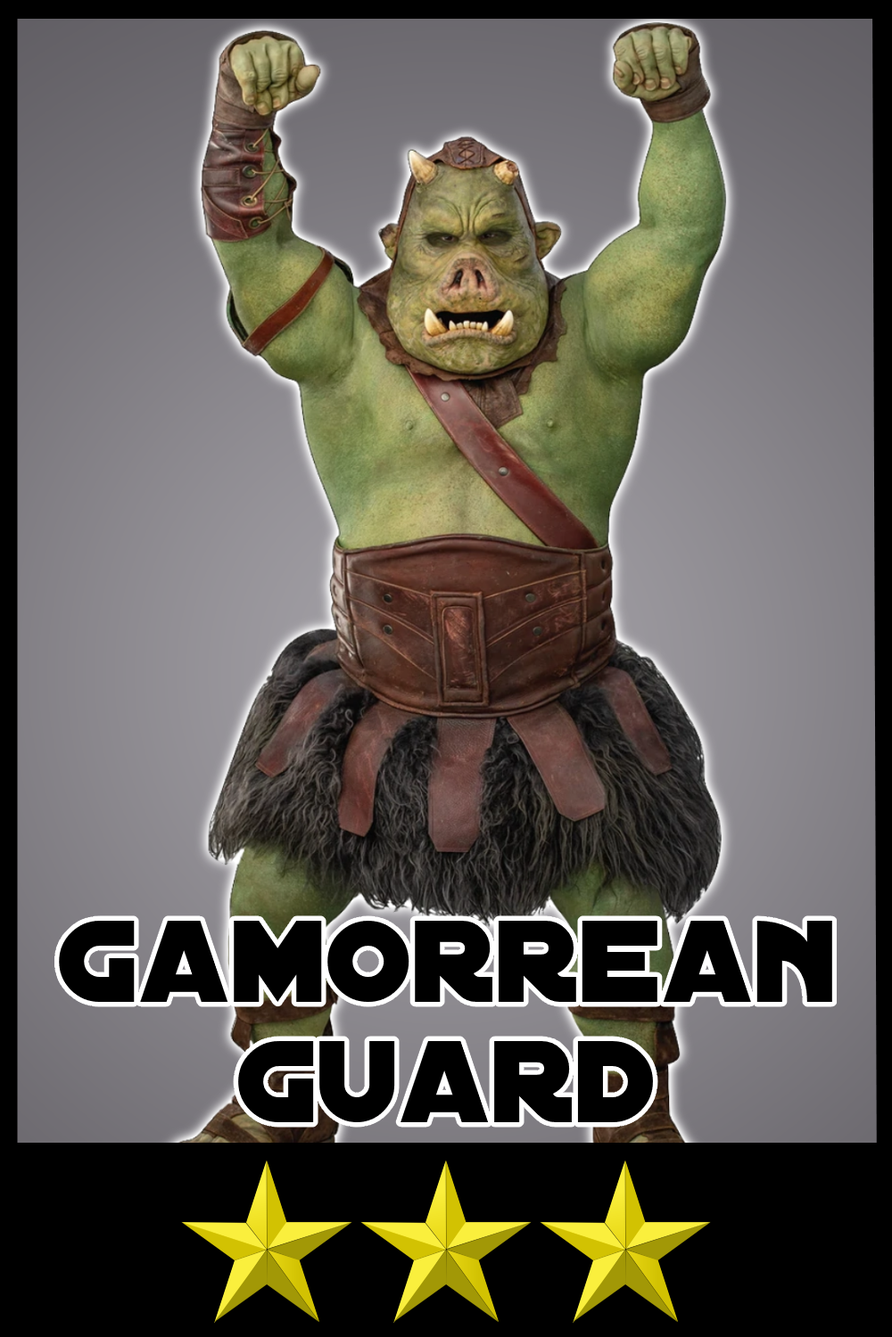
<style>
.page{position:relative;width:892px;height:1337px;background:#000000}
.page>*{position:absolute;margin:0}
.t1{font:124.8px/120.4px "DistantGalaxy";color:#000000}
</style>
<div class="page">
<p class="t1" style="left:59px;top:920px;width:773px;height:203px;text-align:center">Gamorrean<br>guard</p>
</div>
